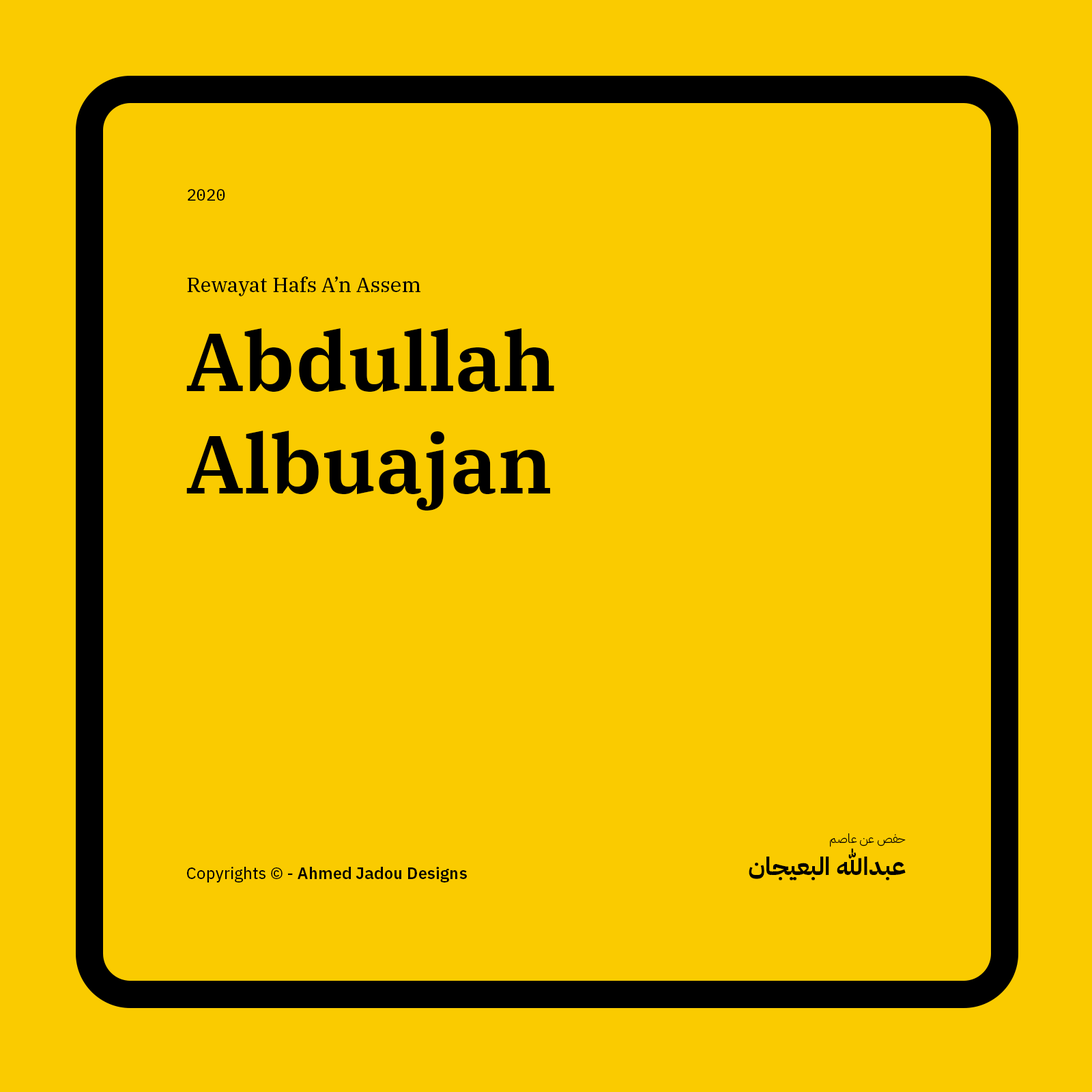
<style>
.page{position:relative;width:1092px;height:1092px;background:#facb00}
.page>*{position:absolute;margin:0}
.t1{font:16.4px "IBMPlexMono-Text";color:#000000}
.t2{font:20.5px "IBMPlexSerif-Text";color:#000000}
.t3{font:81.9px/102.7px "IBMPlexSerif-SemiBold";color:#000000}
.t4{font:12.3px "IBMPlexArabic-Light";color:#000000}
.t5{font:24.6px "IBMPlexArabic-Bold";color:#000000}
.t6{font:16.4px "IBMPlexSans-SemiBold";color:#000000}
.t7{font:16.4px "IBMPlexSans-Text";color:#000000}
</style>
<div class="page">
<p class="t1" style="left:188px;top:189px;width:37px;height:12px">2020</p>
<p class="t2" style="left:187px;top:276px;width:233px;height:20px">Rewayat Hafs A’n Assem</p>
<p class="t3" style="left:186px;top:328px;width:368px;height:183px">Abdullah Albuajan</p>
<p class="t4" style="left:830px;top:833px;width:76px;height:14px">حفص عن عاصم</p>
<p class="t5" style="left:749px;top:848px;width:157px;height:32px">عبدالله البعيجان</p>
<p class="t6" style="left:187px;top:867px;width:280px;height:15px"><span class="t7">Copyrights © - </span>Ahmed Jadou Designs</p>
</div>
